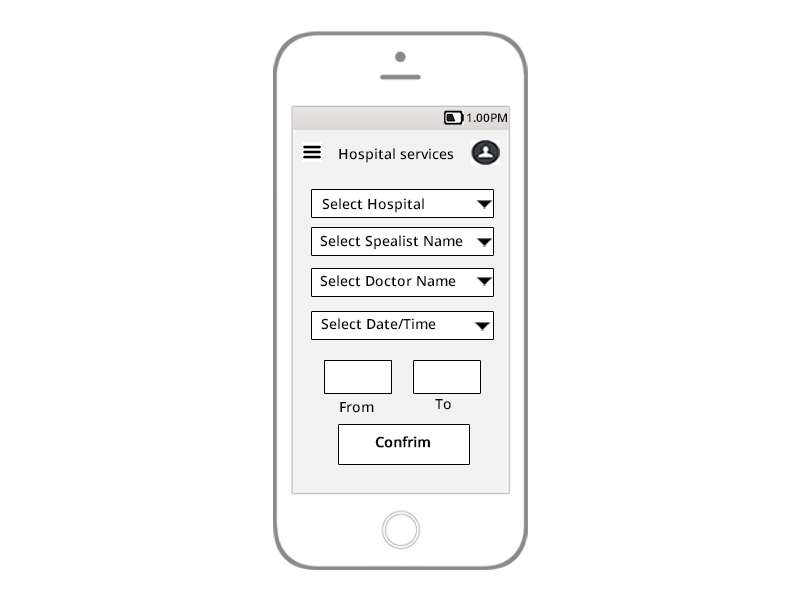
<style>
.page{position:relative;width:800px;height:600px;background:#ffffff}
.page>*{position:absolute;margin:0}
.t1{font:12px "OpenSans-Semibold";color:#090909}
.t2{font:14px "OpenSans-Semibold";color:#090909}
.t3{font:14px "OpenSans-Semibold";color:#090909;font-weight:bold}
</style>
<div class="page">
<p class="t1" style="left:467px;top:113px;width:40px;height:9px"><span class="t2">                                         </span>1.00PM</p>
<p class="t2" style="left:339px;top:148px;width:115px;height:15px">Hospital services</p>
<p class="t2" style="left:322px;top:198px;width:102px;height:15px"><span class="t1"><br> <br>  </span>Select Hospital</p>
<p class="t2" style="left:320px;top:235px;width:143px;height:15px"><span class="t1"><br>  </span>Select Spealist Name</p>
<p class="t2" style="left:320px;top:275px;width:136px;height:12px">Select Doctor Name</p>
<p class="t2" style="left:321px;top:318px;width:115px;height:12px">Select Date/Time</p>
<p class="t2" style="left:435px;top:399px;width:16px;height:11px">To</p>
<p class="t2" style="left:340px;top:402px;width:34px;height:11px">From</p>
<p class="t3" style="left:375px;top:436px;width:55px;height:12px"><span class="t1"><br>   <br>     </span>Confrim</p>
</div>
